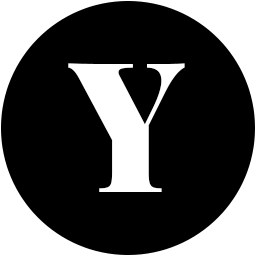
<style>
.page{position:relative;width:256px;height:256px;background:#000000}
.page>*{position:absolute;margin:0}
.t1{font:180px "PlayfairDisplay-Black";color:#ffffff}
</style>
<div class="page">
<p class="t1" style="left:68px;top:63px;width:117px;height:129px">Y</p>
</div>
